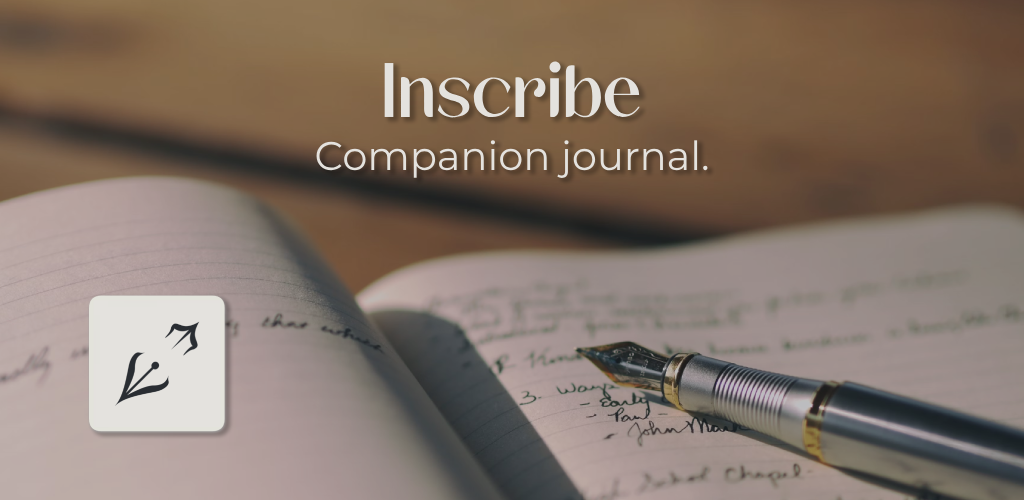
<style>
.page{position:relative;width:1024px;height:500px}
.page>*{position:absolute;margin:0}
.t1{font:80px "BrogiFREE";color:#e4e2de}
.t2{font:40px "Montserrat-Regular";color:#e4e2de}
</style>
<div class="page">
<p class="t1" style="left:384px;top:61px;width:256px;height:57px">Inscribe</p>
<p class="t2" style="left:316px;top:140px;width:392px;height:38px">Companion journal.</p>
</div>
